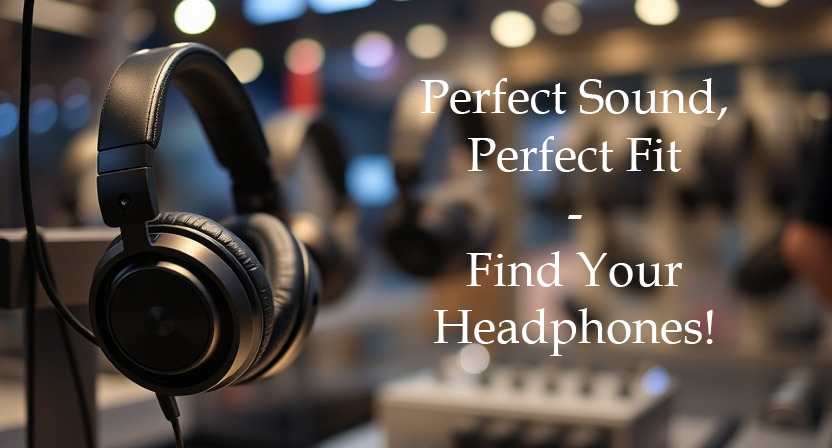
<style>
.page{position:relative;width:832px;height:448px}
.page>*{position:absolute;margin:0}
.t1{font:48px "BookAntiqua";color:#ffffff}
</style>
<div class="page">
<p class="t1" style="left:421px;top:78px;width:306px;height:278px;text-align:center">Perfect Sound, Perfect Fit <br>-<br>Find Your Headphones!</p>
</div>
